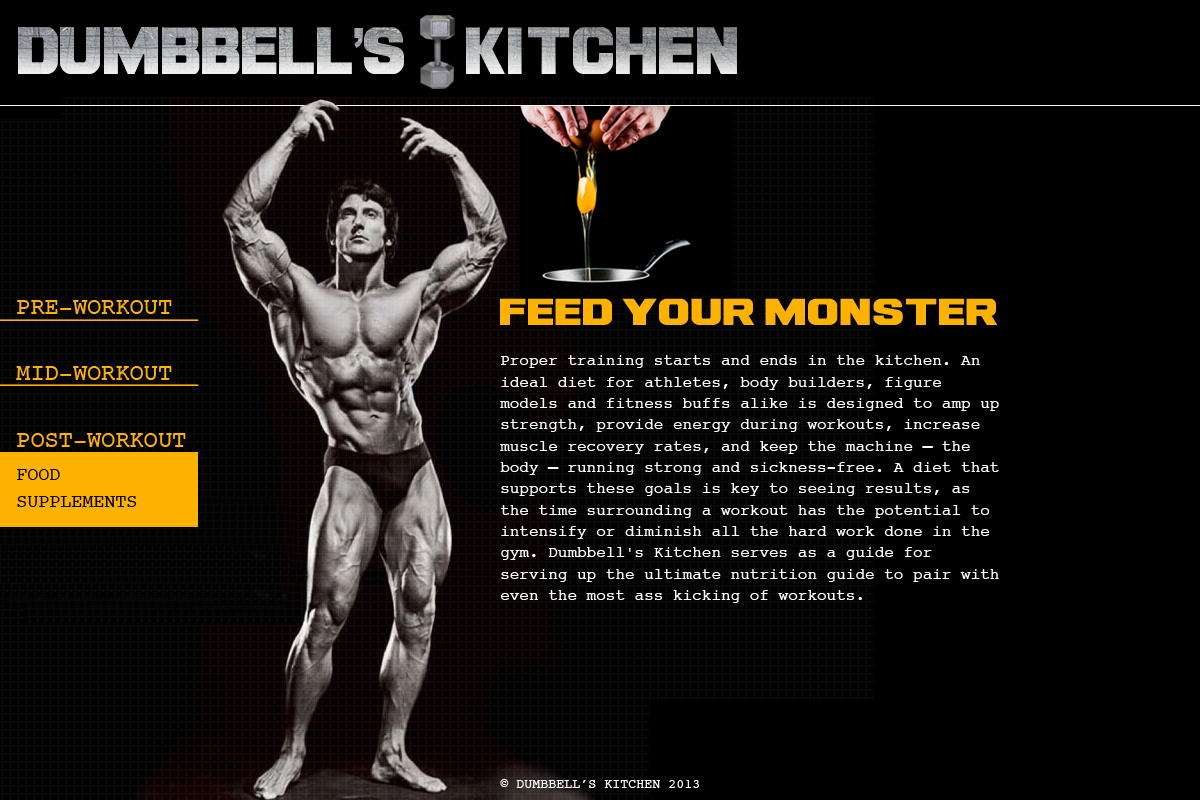
<style>
.page{position:relative;width:1200px;height:800px;background:#000000}
.page>*{position:absolute;margin:0}
.t1{font:16px/21.3px "Courier";color:#fdfdfd}
.t2{font:29.3px/40px "Ash";color:#fdb201}
.t3{font:16px/40px "Courier";color:#fdfdfd}
.t4{font:16px/26.7px "Courier";color:#fdfdfd}
.t5{font:13.3px "Courier";color:#fdfdfd}
</style>
<div class="page">
<p class="t1" style="left:500px;top:298px;width:499px;height:305px"><span class="t2">FEED YOUR MONSTER<br></span><span class="t3">Proper training starts and ends in the </span><span class="t4">kitchen. An </span>ideal diet for athletes, body builders, figure models and fitness buffs alike is designed to amp up strength, provide energy during workouts, increase muscle recovery rates, and keep the machine — the body — running strong and sickness-free. A diet that supports these goals is key to seeing results, as the time surrounding a workout has the potential to intensify or diminish all the hard work done in the gym. Dumbbell's Kitchen serves as a guide for serving up the ultimate nutrition guide to pair with even the most ass kicking of workouts.</p>
<p class="t5" style="left:500px;top:779px;width:199px;height:9px">© DUMBBELL’S KITCHEN 2013</p>
</div>
